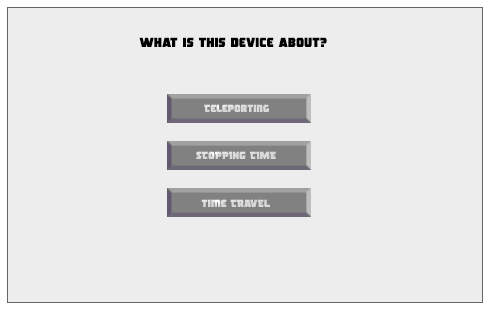
<style>
.page{position:relative;width:491px;height:311px;background:#ededed}
.page>*{position:absolute;margin:0}
.t1{font:12.9px "RogueHero";color:#000000}
.t2{font:10.4px "RogueHero";color:#dad9d9}
</style>
<div class="page">
<p class="t1" style="left:139px;top:37px;width:188px;height:10px">What is this device about?</p>
<p class="t2" style="left:204px;top:104px;width:65px;height:8px">Teleporting</p>
<p class="t2" style="left:196px;top:151px;width:80px;height:8px">STOPPING TIME</p>
<p class="t2" style="left:201px;top:199px;width:69px;height:8px">time TRAVEL</p>
</div>
